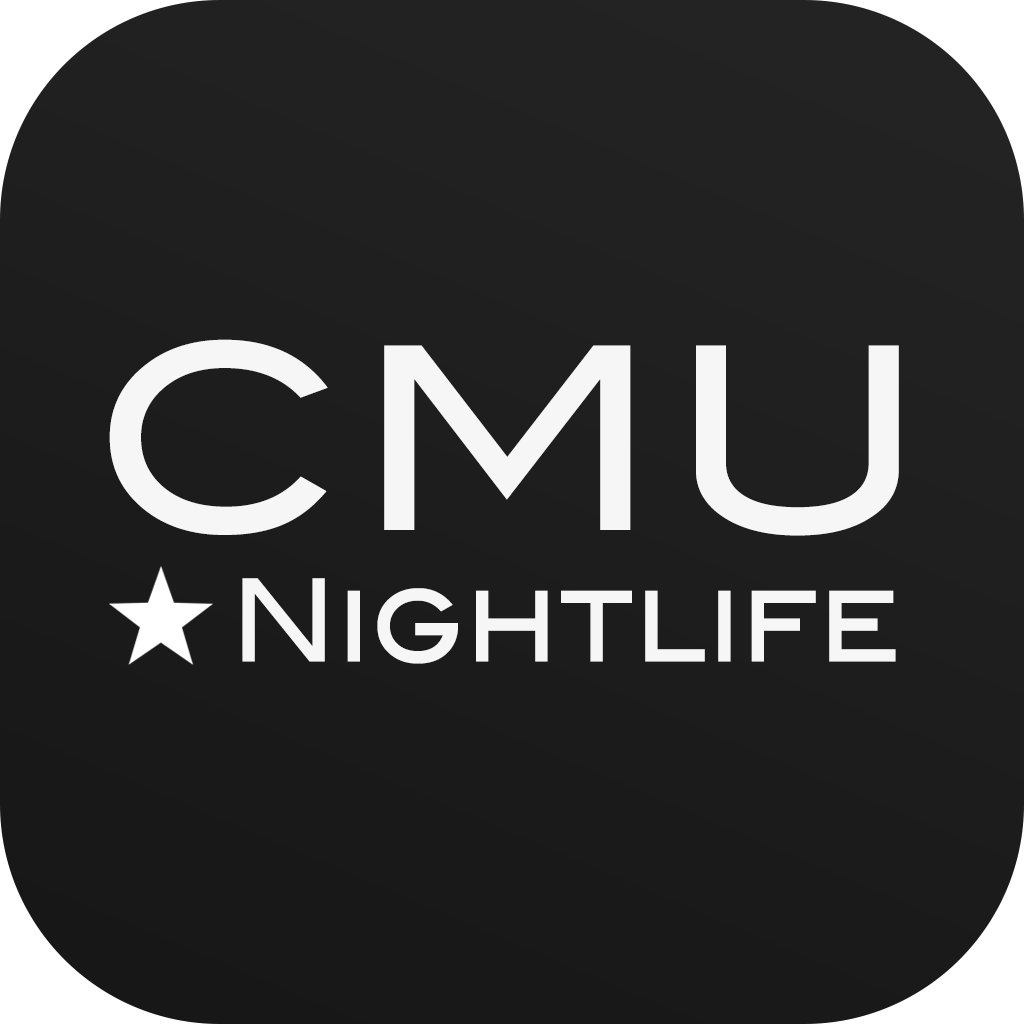
<style>
.page{position:relative;width:1024px;height:1024px}
.page>*{position:absolute;margin:0}
.t1{font:254.4px "BlairMdITCTTMedium";letter-spacing:0.03em;color:#f7f6f6}
.t2{font:115px "BlairMdITCTTMedium";letter-spacing:0.005em;color:#f7f6f6;scale:0.87 1}
</style>
<div class="page">
<p class="t1" style="left:109px;top:339px;width:790px;height:197px">CMU</p>
<p class="t2" style="left:242px;top:578px;width:654px;height:86px">Nightlife</p>
</div>
